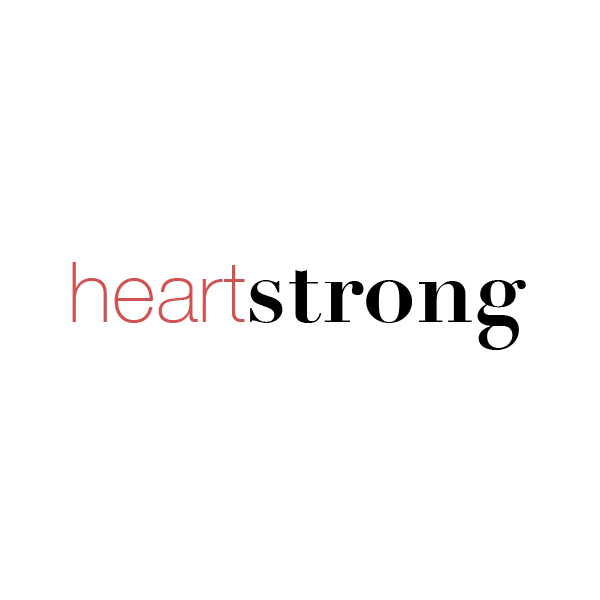
<style>
.page{position:relative;width:600px;height:600px;background:#ffffff}
.page>*{position:absolute;margin:0}
.t1{font:94px "Didot-Bold";color:#000000}
.t2{font:84px "HelveticaNeue-Thin";color:#d05353}
</style>
<div class="page">
<p class="t1" style="left:72px;top:262px;width:454px;height:88px"><span class="t2">heart</span>strong</p>
</div>
